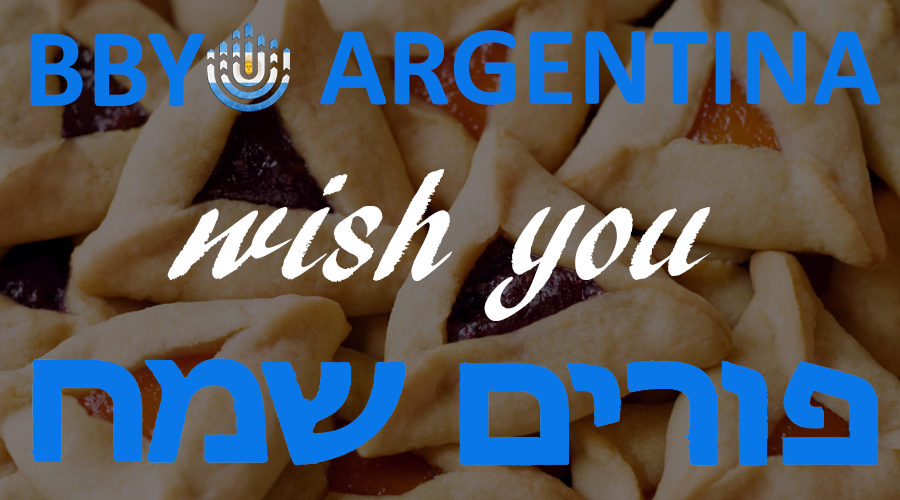
<style>
.page{position:relative;width:900px;height:500px}
.page>*{position:absolute;margin:0}
.t1{font:113.9px "Calibri-Bold";color:#0977e8}
.t2{font:150px "ARBLANCA";color:#ffffff}
</style>
<div class="page">
<p class="t1" style="left:320px;top:30px;width:561px;height:75px">ARGENTINA</p>
<p class="t1" style="left:30px;top:33px;width:175px;height:74px">BBY</p>
<p class="t2" style="left:167px;top:169px;width:544px;height:152px">wish you</p>
</div>
